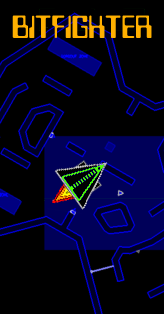
<style>
.page{position:relative;width:164px;height:314px;background:#000000}
.page>*{position:absolute;margin:0}
.t1{font:27.1px "Checkbook";color:#ffb000}
</style>
<div class="page">
<p class="t1" style="left:12px;top:15px;width:140px;height:23px">BITFIGHTER</p>
</div>
